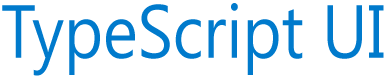
<style>
.page{position:relative;width:386px;height:77px;background:#ffffff}
.page>*{position:absolute;margin:0}
.t1{font:74.9px "SegoeUI";color:#007acc;scale:0.88 1}
</style>
<div class="page">
<p class="t1" style="left:2px;top:3px;width:382px;height:73px">TypeScript UI</p>
</div>
